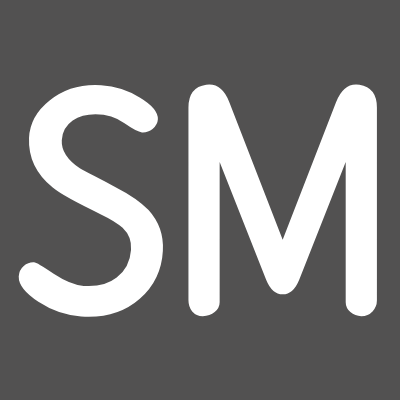
<style>
.page{position:relative;width:400px;height:400px;background:#525151}
.page>*{position:absolute;margin:0}
.t1{font:312px "DXLBaB-KSCpc-EUC-H";color:#ffffff}
</style>
<div class="page">
<p class="t1" style="left:18px;top:82px;width:359px;height:237px">SM</p>
</div>
